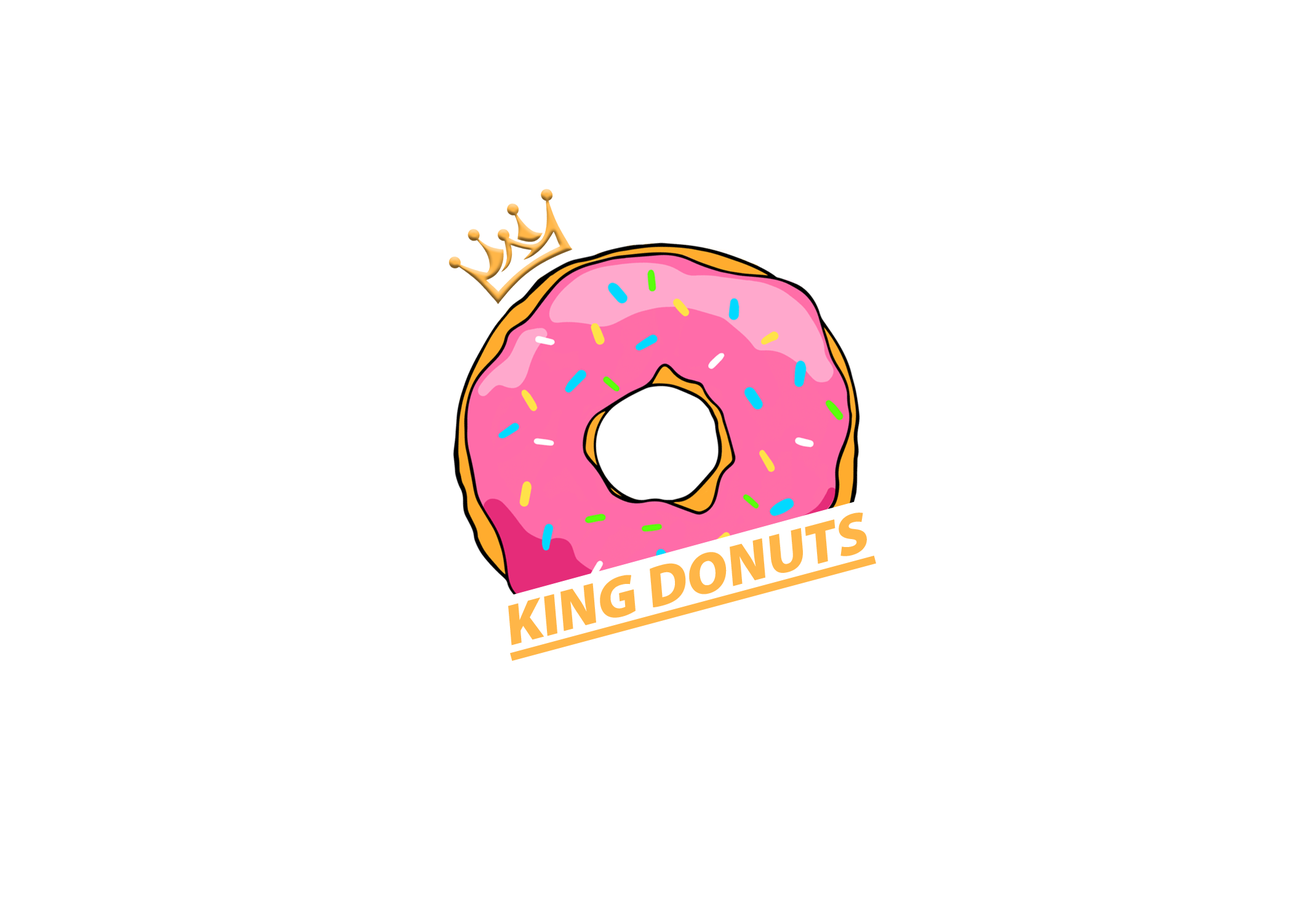
<style>
.page{position:relative;width:1292px;height:923px;background:#ffffff}
.page>*{position:absolute;margin:0}
.t1{font:57.5px "MyriadProTT-Black";color:#ffb648;font-style:italic}
</style>
<div class="page">
<p class="t1" style="left:508px;top:513px;width:359px;height:132px;rotate:-15deg">KING DONUTS</p>
</div>
